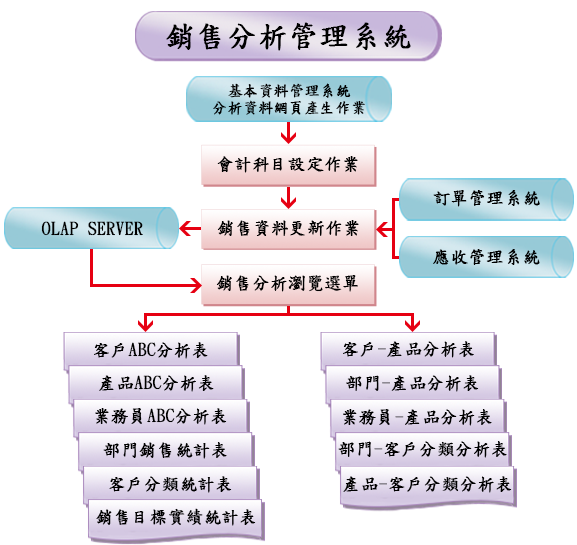
<style>
.page{position:relative;width:577px;height:545px;background:#ffffff}
.page>*{position:absolute;margin:0}
.t1{font:30px "DFKaiShu-SB-Estd-BF";color:#000000;font-weight:bold}
.t2{font:15px/17.5px "DFKaiShu-SB-Estd-BF";color:#000000;font-weight:bold}
.t3{font:17.5px "DFKaiShu-SB-Estd-BF";color:#000000;font-weight:bold}
</style>
<div class="page">
<p class="t1" style="left:166px;top:22px;width:245px;height:29px">銷售分析管理系統</p>
<p class="t2" style="left:213px;top:83px;width:152px;height:32px;text-align:center">基本資料管理系統<br>分析資料網頁產生作業</p>
<p class="t3" style="left:217px;top:156px;width:141px;height:17px">會計科目設定作業</p>
<p class="t3" style="left:433px;top:190px;width:107px;height:17px">訂單管理系統</p>
<p class="t3" style="left:41px;top:221px;width:102px;height:15px">OLAP SERVER</p>
<p class="t3" style="left:217px;top:220px;width:142px;height:16px">銷售資料更新作業</p>
<p class="t3" style="left:433px;top:249px;width:107px;height:16px">應收管理系統</p>
<p class="t3" style="left:216px;top:275px;width:142px;height:17px">銷售分析瀏覽選單</p>
<p class="t3" style="left:94px;top:342px;width:114px;height:17px">客戶ABC分析表</p>
<p class="t3" style="left:343px;top:341px;width:131px;height:17px">客戶-產品分析表</p>
<p class="t3" style="left:99px;top:375px;width:115px;height:17px">產品ABC分析表</p>
<p class="t3" style="left:346px;top:375px;width:133px;height:17px">部門-產品分析表</p>
<p class="t3" style="left:95px;top:408px;width:132px;height:17px">業務員ABC分析表</p>
<p class="t3" style="left:343px;top:409px;width:149px;height:17px">業務員-產品分析表</p>
<p class="t3" style="left:103px;top:442px;width:124px;height:17px">部門銷售統計表</p>
<p class="t3" style="left:338px;top:441px;width:169px;height:17px">部門-客戶分類分析表</p>
<p class="t3" style="left:109px;top:476px;width:123px;height:17px">客戶分類統計表</p>
<p class="t3" style="left:343px;top:476px;width:169px;height:17px">產品-客戶分類分析表</p>
<p class="t3" style="left:96px;top:508px;width:160px;height:18px">銷售目標實績統計表</p>
</div>
